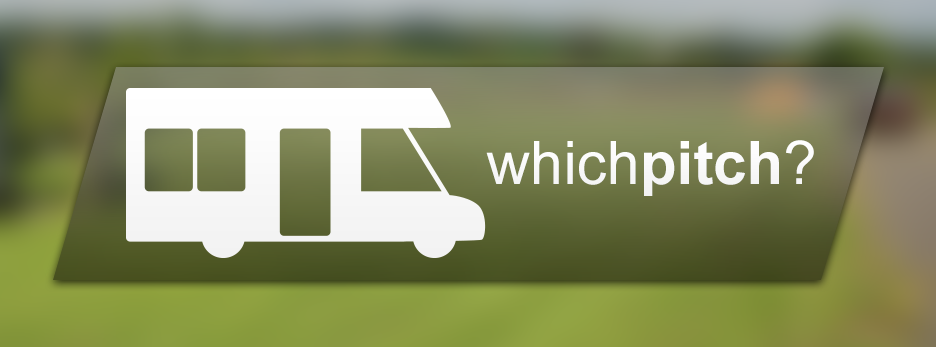
<style>
.page{position:relative;width:936px;height:347px}
.page>*{position:absolute;margin:0}
.t1{font:60px "ArialMT";color:#f9f9f9}
.t2{font:60px "Arial-BoldMT";color:#f9f9f9}
</style>
<div class="page">
<p class="t1" style="left:486px;top:140px;width:328px;height:56px">which<span class="t2">pitch</span>?</p>
</div>
